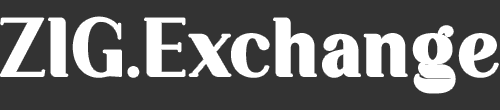
<style>
.page{position:relative;width:500px;height:110px;background:#333333}
.page>*{position:absolute;margin:0}
.t1{font:70.5px "DahliaRegictik";letter-spacing:0.04em;color:#ffffff}
</style>
<div class="page">
<p class="t1" style="left:0px;top:17px;width:498px;height:76px">ZIG.Exchange</p>
</div>
